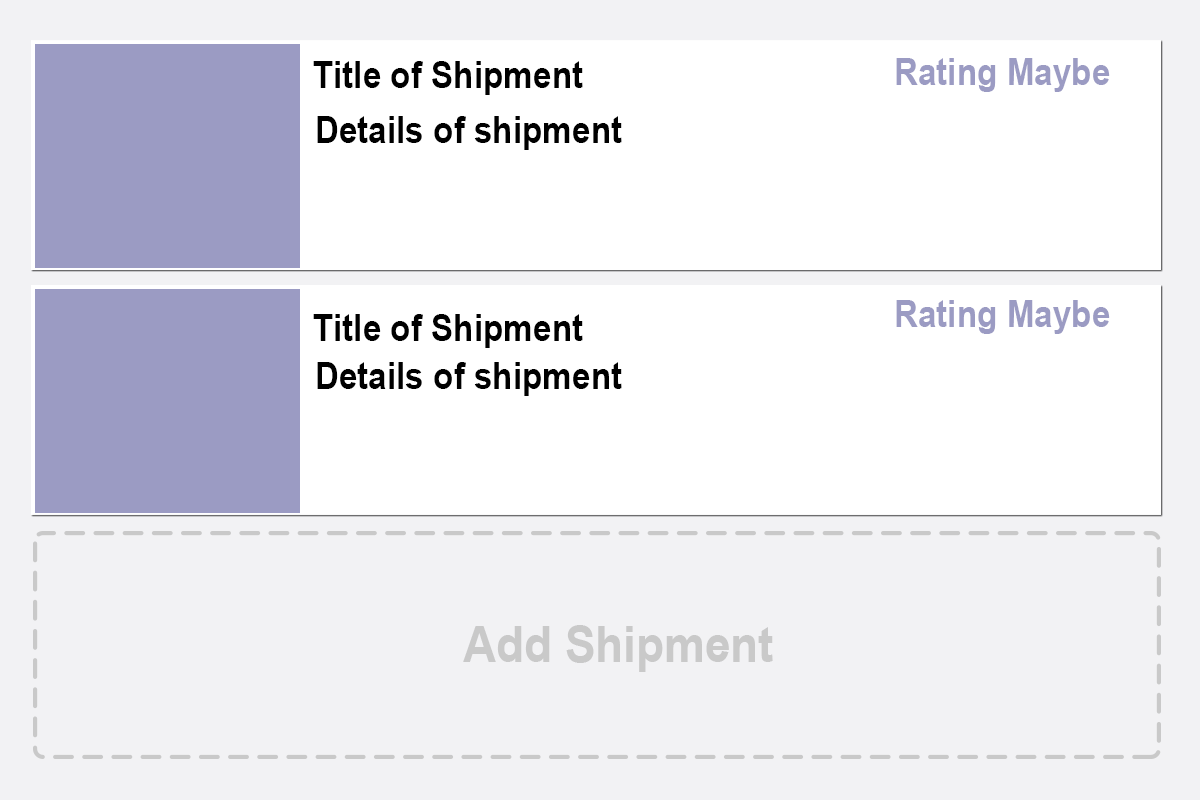
<style>
.page{position:relative;width:1200px;height:800px;background:#f2f2f4}
.page>*{position:absolute;margin:0}
.t1{font:36.7px "Arial-BoldMT";color:#000000;scale:0.91 1}
.t2{font:36.7px "Arial-BoldMT";color:#9b9bc3;scale:0.91 1}
.t3{font:50.4px "Arial-BoldMT";color:#c9c9c9;scale:0.91 1}
</style>
<div class="page">
<p class="t1" style="left:313px;top:61px;width:270px;height:34px">Title of Shipment</p>
<p class="t2" style="left:896px;top:58px;width:214px;height:34px">Rating Maybe</p>
<p class="t1" style="left:317px;top:116px;width:305px;height:34px">Details of shipment</p>
<p class="t2" style="left:896px;top:300px;width:214px;height:34px">Rating Maybe</p>
<p class="t1" style="left:313px;top:314px;width:270px;height:34px">Title of Shipment</p>
<p class="t1" style="left:317px;top:362px;width:305px;height:34px">Details of shipment</p>
<p class="t3" style="left:463px;top:625px;width:310px;height:47px">Add Shipment</p>
</div>
